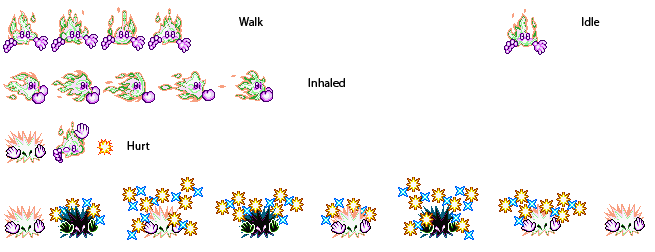
<style>
.page{position:relative;width:655px;height:252px;background:#ffffff}
.page>*{position:absolute;margin:0}
.t1{font:12px "MyriadPro-Regular";color:#030303}
</style>
<div class="page">
<p class="t1" style="left:239px;top:17px;width:24px;height:9px">Walk</p>
<p class="t1" style="left:582px;top:17px;width:18px;height:9px">Idle</p>
<p class="t1" style="left:308px;top:78px;width:37px;height:9px">Inhaled</p>
<p class="t1" style="left:127px;top:141px;width:23px;height:9px">Hurt</p>
</div>
